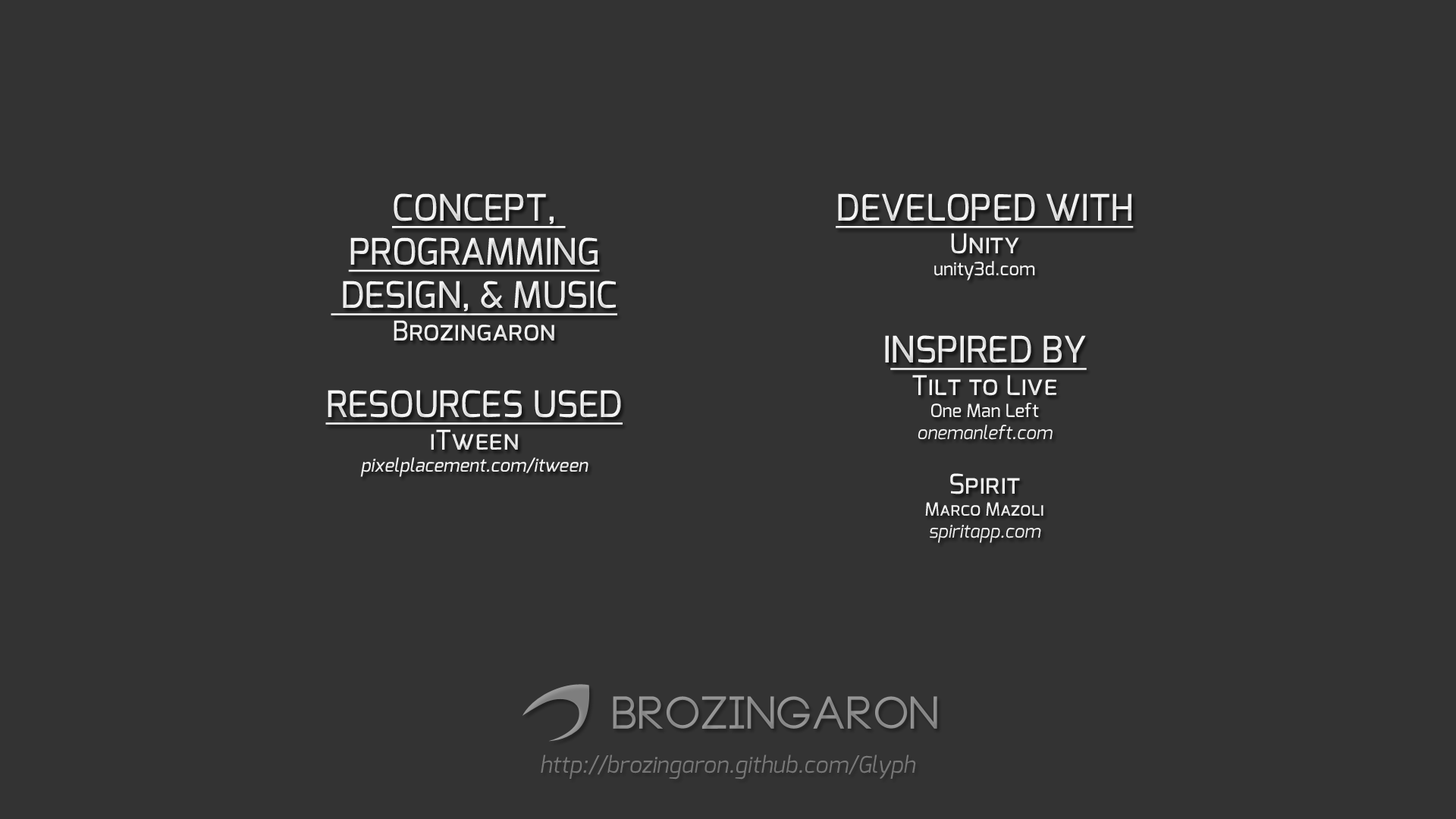
<style>
.page{position:relative;width:1456px;height:819px;background:#333333}
.page>*{position:absolute;margin:0}
.t1{font:36.4px "Exo-Medium";color:#ffffff;text-transform:uppercase;text-decoration:underline}
.t2{font:27.3px "Exo-Medium";color:#ffffff;font-variant:small-caps}
.t3{font:18.2px "Exo-Medium";color:#ffffff;font-style:italic}
.t4{font:18.2px "Exo-Medium";color:#ffffff}
.t5{font:36.4px "Exo-Medium";color:#ffffff;text-transform:uppercase}
.t6{font:18.2px "Exo-Italic";color:#ffffff}
.t7{font:18.2px "Exo-Medium";color:#ffffff;font-variant:small-caps}
.t8{font:22.7px "Exo-Italic";color:#787878}
</style>
<div class="page">
<p class="t1" style="left:325px;top:193px;width:298px;height:284px;text-align:center">Concept, <br>programming<br> Design, &amp; Music<br><span class="t2">Brozingaron<br><br></span>Resources Used<br><span class="t2">iTween<br></span><span class="t3">pixelplacement.com/itween</span></p>
<p class="t1" style="left:836px;top:193px;width:298px;height:350px;text-align:center">Developed With<br><span class="t2">Unity<br></span><span class="t4">unity3d.com<br><br></span><span class="t5">I</span>nspired by<br><span class="t2">Tilt to Live<br></span><span class="t4">One Man Left<br></span><span class="t6">onemanleft.com<br><br></span><span class="t2">Spirit<br></span><span class="t7">Marco Mazoli<br></span><span class="t6">spiritapp.com</span></p>
<p class="t8" style="left:541px;top:755px;width:375px;height:25px">http://brozingaron.github.com/Glyph</p>
</div>
